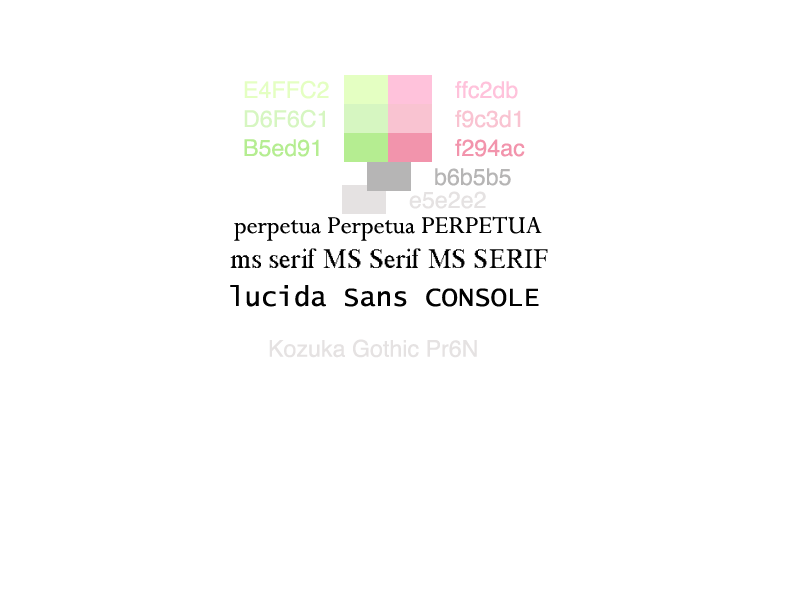
<style>
.page{position:relative;width:800px;height:600px;background:#ffffff}
.page>*{position:absolute;margin:0}
.t1{font:23.2px "Helvetica";color:#e4ffc2}
.t2{font:23.2px "Helvetica";color:#ffc2db}
.t3{font:23.2px "Helvetica";color:#d6f6c1}
.t4{font:23.2px "Helvetica";color:#f9c3d1}
.t5{font:23.2px "Helvetica";color:#b5ed91}
.t6{font:23.2px "Helvetica";color:#f294ac}
.t7{font:23.2px "Helvetica";color:#b6b5b5}
.t8{font:23.2px "Helvetica";color:#e5e2e2}
.t9{font:27.2px "Perpetua";color:#010101}
.t10{font:27.2px "MS Serif";color:#010101}
.t11{font:27.2px "LucidaConsole";color:#010101}
</style>
<div class="page">
<p class="t1" style="left:244px;top:80px;width:85px;height:19px">E4FFC2</p>
<p class="t2" style="left:455px;top:81px;width:63px;height:18px">ffc2db</p>
<p class="t3" style="left:244px;top:109px;width:81px;height:19px">D6F6C1</p>
<p class="t4" style="left:455px;top:110px;width:66px;height:18px">f9c3d1</p>
<p class="t5" style="left:244px;top:139px;width:75px;height:18px">B5ed91</p>
<p class="t6" style="left:455px;top:139px;width:70px;height:18px">f294ac</p>
<p class="t7" style="left:435px;top:168px;width:76px;height:18px">b6b5b5</p>
<p class="t8" style="left:409px;top:191px;width:77px;height:18px">e5e2e2</p>
<p class="t9" style="left:234px;top:216px;width:308px;height:25px">perpetua Perpetua PERPETUA</p>
<p class="t10" style="left:230px;top:248px;width:318px;height:20px">ms serif MS Serif MS SERIF</p>
<p class="t11" style="left:230px;top:285px;width:309px;height:22px">lucida Sans CONSOLE</p>
<p class="t8" style="left:269px;top:339px;width:208px;height:19px">Kozuka Gothic Pr6N</p>
</div>
